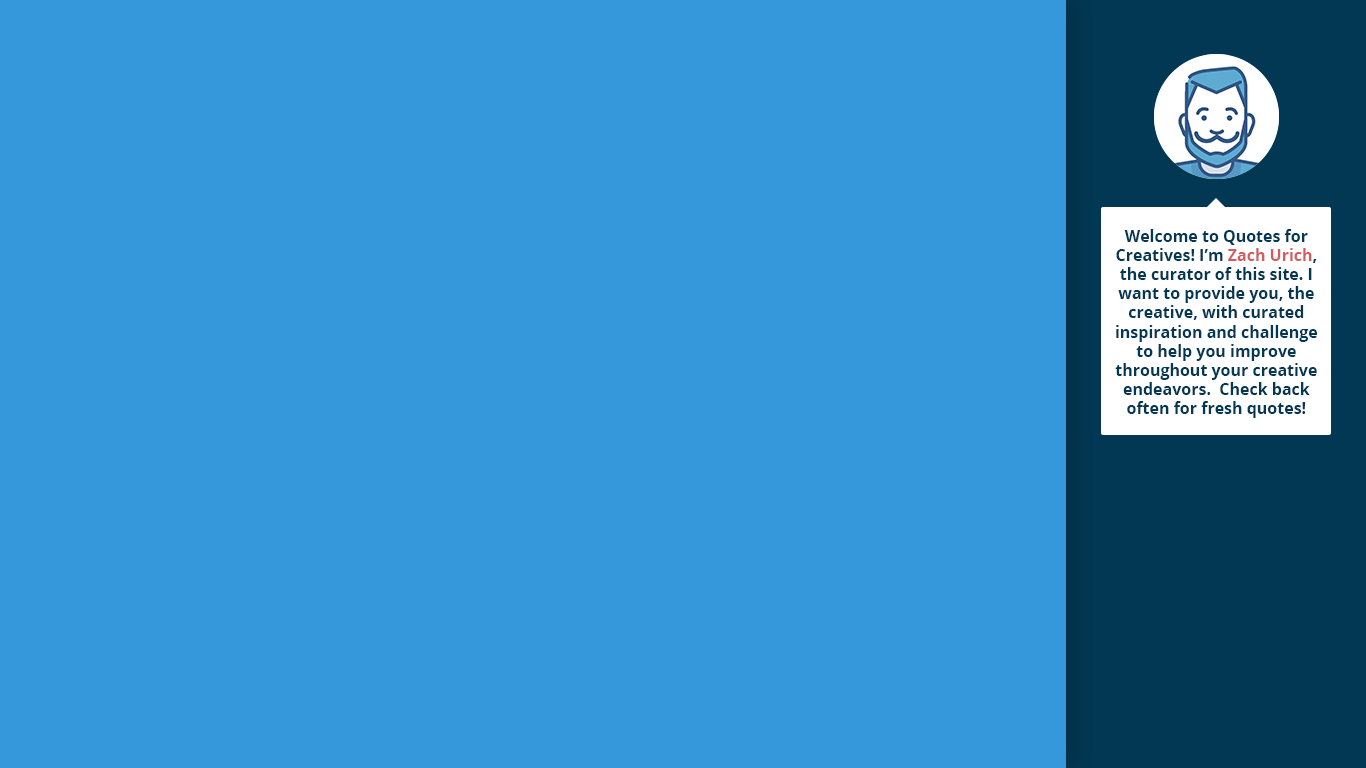
<style>
.page{position:relative;width:1366px;height:768px;background:#3498db}
.page>*{position:absolute;margin:0}
.t1{font:16px "OpenSans-Bold";color:#023854}
.t2{font:16px "OpenSans-Bold";color:#d35c61}
</style>
<div class="page">
<p class="t1" style="left:1115px;top:229px;width:202px;height:189px;text-align:center">Welcome to Quotes for Creatives! I’m <span class="t2">Zach Urich</span>, the curator of this site. I want to provide you, the creative, with curated inspiration and challenge to help you improve throughout your creative endeavors.  Check back often for fresh quotes!</p>
</div>
